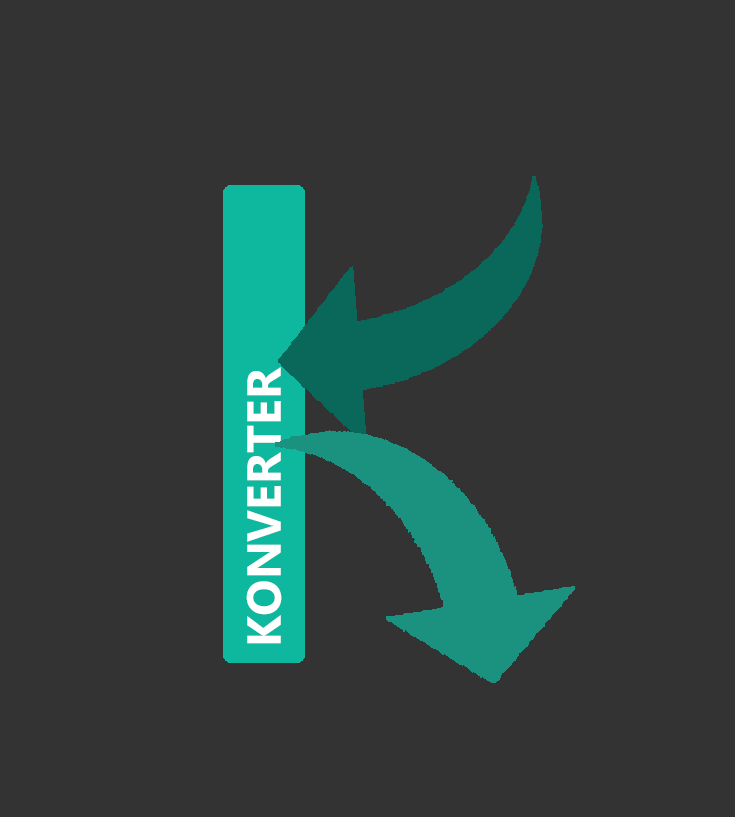
<style>
.page{position:relative;width:735px;height:817px;background:#333333}
.page>*{position:absolute;margin:0}
.t1{font:48px "MyanmarText-Bold";color:#ffffff}
</style>
<div class="page">
<p class="t1" style="left:246px;top:367px;width:36px;height:277px;rotate:-90deg">KONVERTER</p>
</div>
